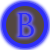
<style>
.page{position:relative;width:50px;height:50px}
.page>*{position:absolute;margin:0}
.t1{font:32.8px "PerpetuaTitlingMT-Light";color:#2d2df8}
</style>
<div class="page">
<p class="t1" style="left:17px;top:13px;width:17px;height:24px">B</p>
</div>
